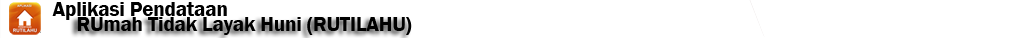
<style>
.page{position:relative;width:1018px;height:38px;background:#ffffff}
.page>*{position:absolute;margin:0}
.t1{font:20.6px "FranklinGothic-Demi";color:#000000}
</style>
<div class="page">
<p class="t1" style="left:52px;top:2px;width:175px;height:18px">Aplikasi Pendataan</p>
<p class="t1" style="left:77px;top:17px;width:335px;height:18px">RUmah Tidak Layak Huni (RUTILAHU)</p>
</div>
